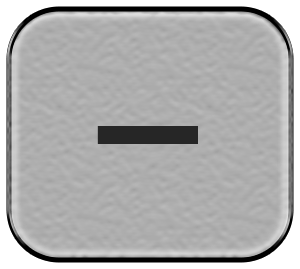
<style>
.page{position:relative;width:300px;height:269px}
.page>*{position:absolute;margin:0}
.t1{font:300px "CenturyGothic";color:#262626;scale:1.24 1}
</style>
<div class="page">
<p class="t1" style="left:97px;top:126px;width:101px;height:18px">-</p>
</div>
